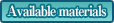
<style>
.page{position:relative;width:114px;height:23px;background:#115777}
.page>*{position:absolute;margin:0}
.t1{font:14px "RyuminPro-ExBold";letter-spacing:-0.08em;color:#ffffff;scale:0.9 1}
</style>
<div class="page">
<p class="t1" style="left:7px;top:5px;width:99px;height:12px">Available materials</p>
</div>
